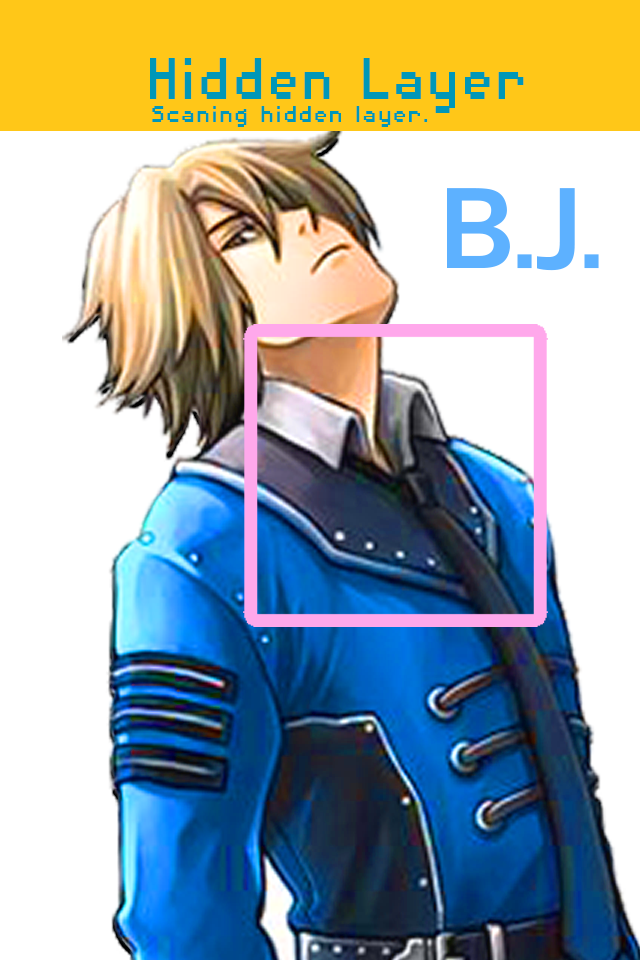
<style>
.page{position:relative;width:640px;height:960px;background:#ffffff}
.page>*{position:absolute;margin:0}
.t1{font:76.6px "DisposableDroidBB";color:#0097b8;scale:0.91 1}
.t2{font:30.3px "DisposableDroidBB";color:#0097b8}
</style>
<div class="page">
<p class="t1" style="left:150px;top:58px;width:374px;height:55px">Hidden Layer</p>
<p class="t2" style="left:152px;top:106px;width:276px;height:21px">Scaning hidden layer.</p>
</div>
